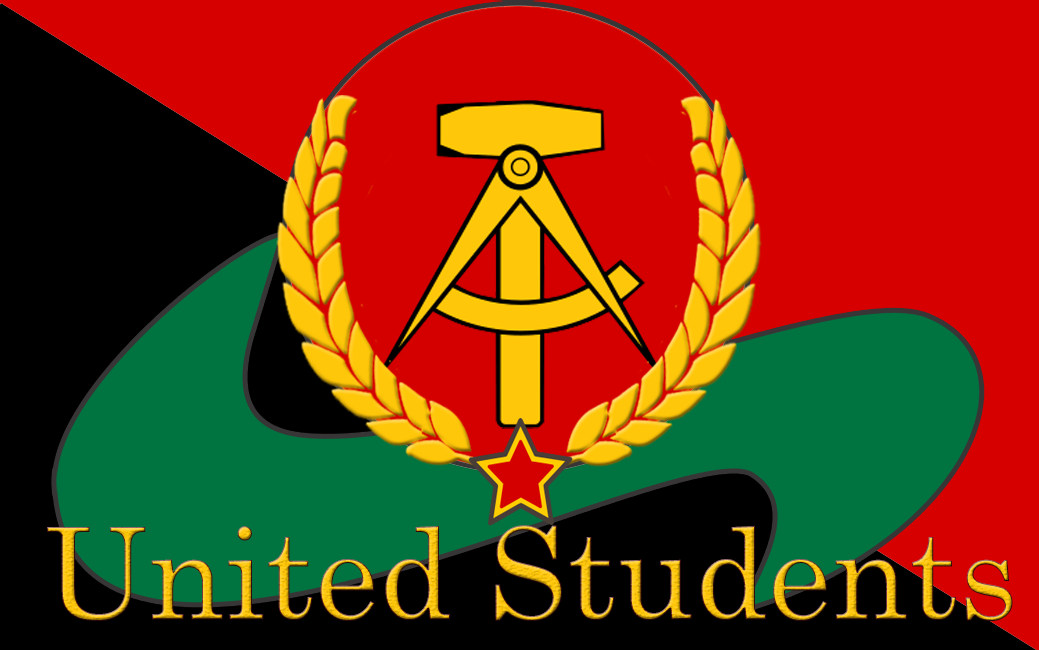
<style>
.page{position:relative;width:1039px;height:650px;background:#d70000}
.page>*{position:absolute;margin:0}
.t1{font:127.3px "CenturySchoolbook"}
</style>
<div class="page">
<p class="t1" style="left:47px;top:524px;width:966px;height:96px">United Students</p>
</div>
